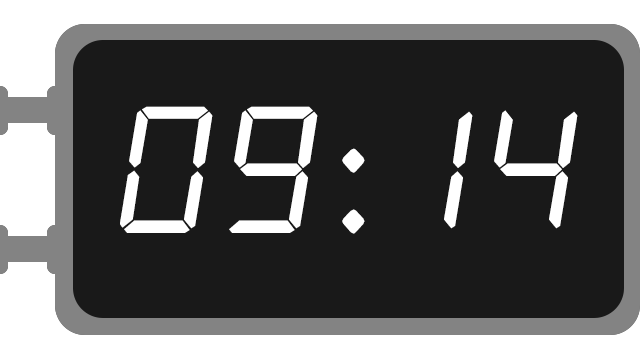
<style>
.page{position:relative;width:640px;height:360px;background:#191919}
.page>*{position:absolute;margin:0}
.t1{font:180px "alarmclock";color:#ffffff}
</style>
<div class="page">
<p class="t1" style="left:120px;top:106px;width:458px;height:128px">09:14</p>
</div>
